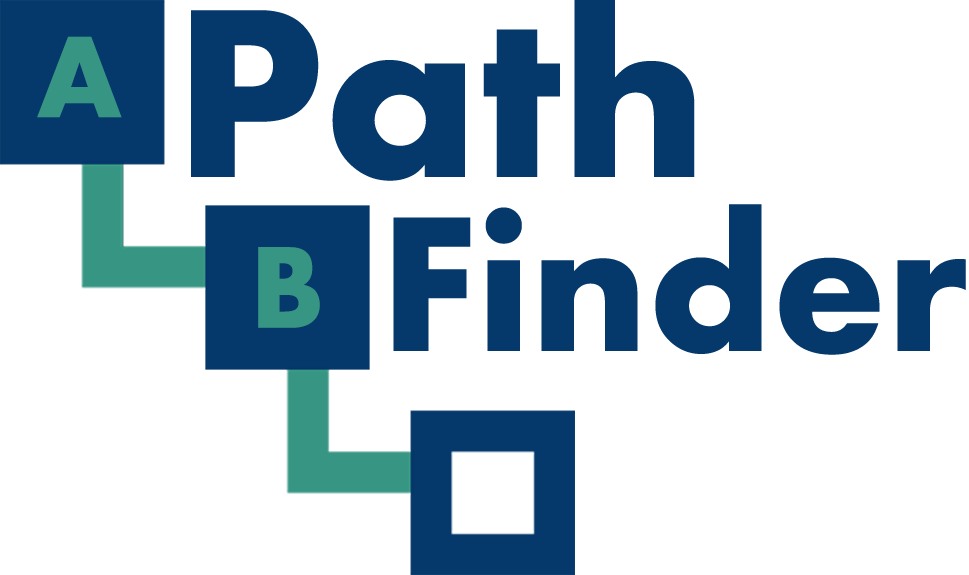
<style>
.page{position:relative;width:969px;height:575px;background:#ffffff}
.page>*{position:absolute;margin:0}
.t1{font:120.7px "Aharoni-Bold";color:#379683}
.t2{font:200px "Aharoni-Bold";color:#05386b}
</style>
<div class="page">
<p class="t1" style="left:37px;top:36px;width:85px;height:82px">A</p>
<p class="t2" style="left:393px;top:204px;width:573px;height:151px">Finder</p>
<p class="t1" style="left:258px;top:247px;width:62px;height:81px">B</p>
</div>
